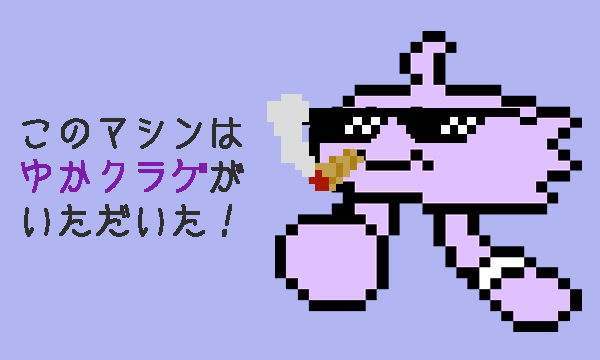
<style>
.page{position:relative;width:600px;height:360px;background:#b1b5f2}
.page>*{position:absolute;margin:0}
.t1{font:37px "cinecaption";color:#2f2f2f;font-weight:bold}
.t2{font:37px "cinecaption";color:#7f1ba9;font-weight:bold}
</style>
<div class="page">
<p class="t1" style="left:21px;top:117px;width:223px;height:120px;text-align:center">このマシンは<br><span class="t2">ゆかクラゲ</span>が<br>いただいた！</p>
</div>
